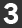
<style>
.page{position:relative;width:22px;height:28px;background:#333333}
.page>*{position:absolute;margin:0}
.t1{font:30px "ProductSans-Bold";color:#ffffff}
</style>
<div class="page">
<p class="t1" style="left:3px;top:3px;width:16px;height:21px">3</p>
</div>
